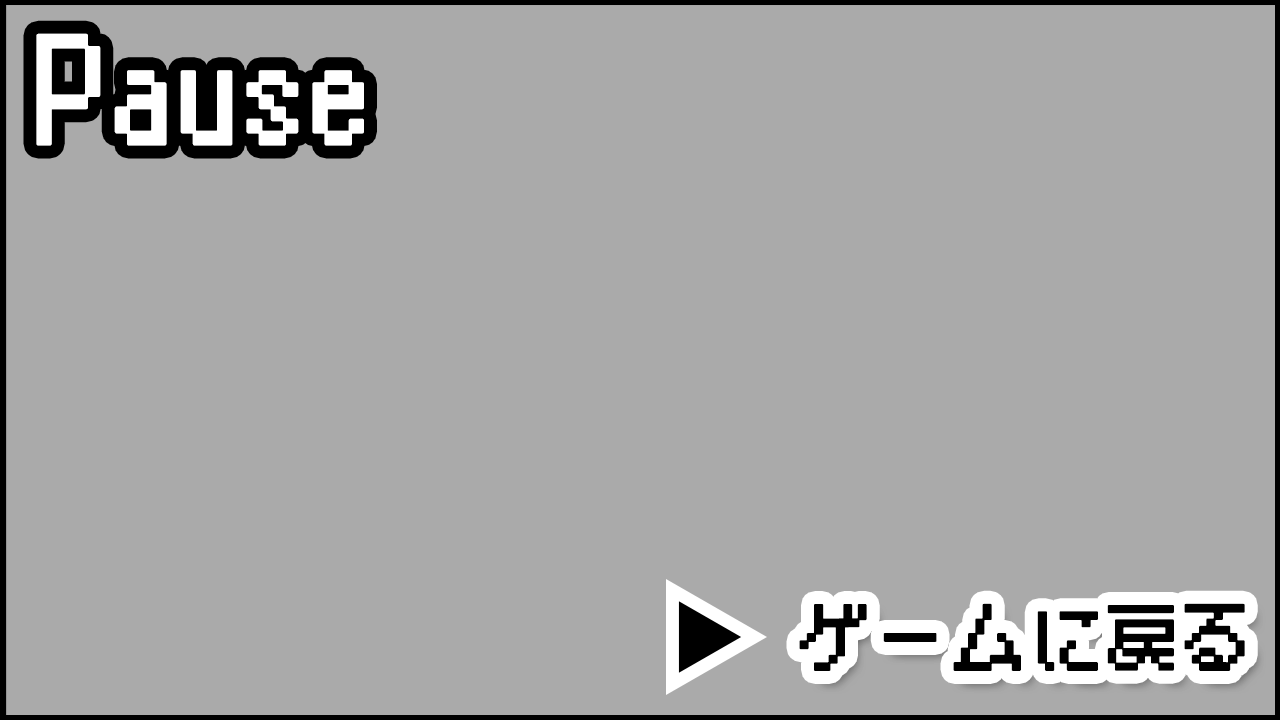
<style>
.page{position:relative;width:1280px;height:720px;background:#aaaaaa}
.page>*{position:absolute;margin:0}
.t1{font:125px "BestTen-CRT";color:#ffffff;font-weight:bold}
.t2{font:75px "BestTen-CRT";color:#000000;font-weight:bold}
</style>
<div class="page">
<p class="t1" style="left:36px;top:33px;width:328px;height:113px">Pause</p>
<p class="t2" style="left:799px;top:603px;width:446px;height:68px">ゲームに戻る</p>
</div>
